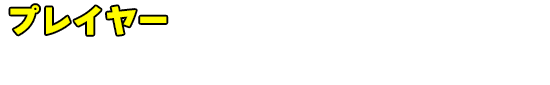
<style>
.page{position:relative;width:550px;height:85px;background:#ffffff}
.page>*{position:absolute;margin:0}
.t1{font:32.5px "WanpakuRuika-08";color:#fffc00}
</style>
<div class="page">
<p class="t1" style="left:10px;top:5px;width:157px;height:30px">プレイヤー</p>
</div>
